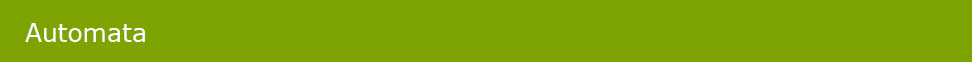
<style>
.page{position:relative;width:972px;height:62px;background:#7da400}
.page>*{position:absolute;margin:0}
.t1{font:25px "Verdana";color:#ffffff}
</style>
<div class="page">
<p class="t1" style="left:25px;top:23px;width:120px;height:19px">Automata</p>
</div>
